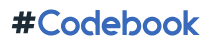
<style>
.page{position:relative;width:209px;height:44px;background:#ffffff}
.page>*{position:absolute;margin:0}
.t1{font:35.6px "Quantify-Bold";color:#3869ba}
.t2{font:35.6px "Quantify-Bold";color:#1c2b36}
</style>
<div class="page">
<p class="t1" style="left:11px;top:9px;width:189px;height:27px"><span class="t2">#</span>Codebook</p>
</div>
